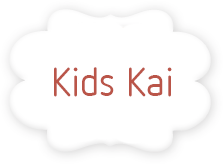
<style>
.page{position:relative;width:223px;height:164px;background:#ffffff}
.page>*{position:absolute;margin:0}
.t1{font:40px "NettoOT";color:#ba5549}
</style>
<div class="page">
<p class="t1" style="left:54px;top:67px;width:118px;height:30px">Kids Kai</p>
</div>
